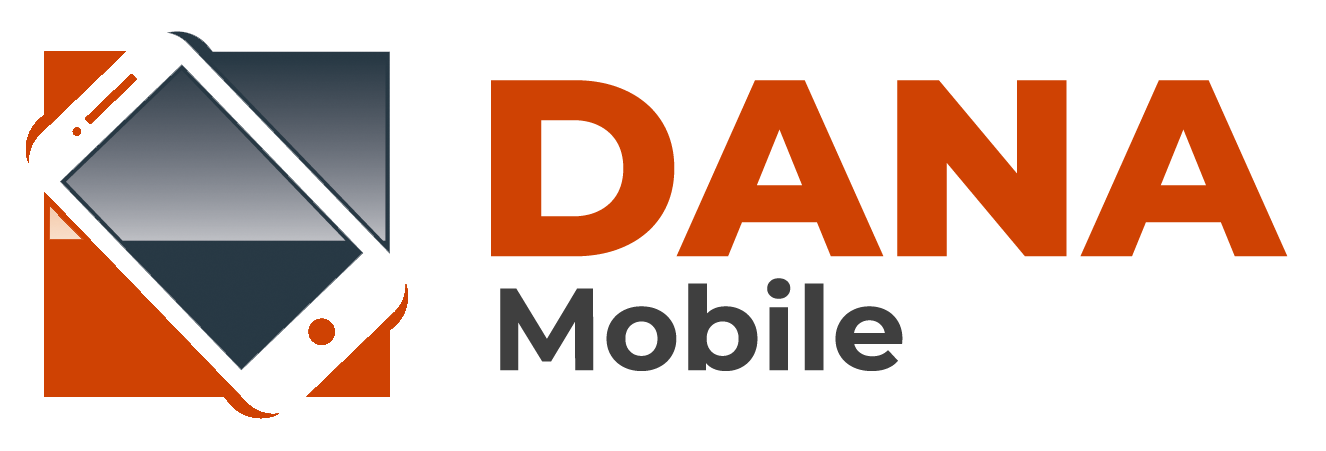
<style>
.page{position:relative;width:1326px;height:451px;background:#ffffff}
.page>*{position:absolute;margin:0}
.t1{font:251.2px "Montserrat-ExtraBold";color:#cf4203}
.t2{font:116.4px "Montserrat-Bold";color:#3f3f3f}
</style>
<div class="page">
<p class="t1" style="left:491px;top:80px;width:797px;height:177px">DANA</p>
<p class="t2" style="left:500px;top:278px;width:403px;height:93px">Mobile</p>
</div>
